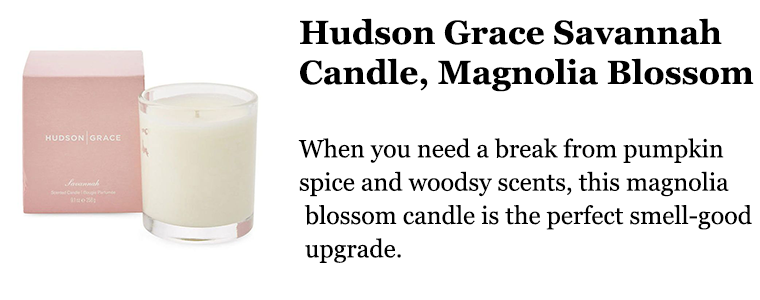
<style>
.page{position:relative;width:760px;height:300px;background:#ffffff}
.page>*{position:absolute;margin:0}
.t1{font:25px/33.3px "Georgia";color:#000000}
.t2{font:33.3px "Georgia-Bold";color:#000000}
</style>
<div class="page">
<p class="t1" style="left:298px;top:18px;width:456px;height:245px"><span class="t2">Hudson Grace Savannah <br>Candle, Magnolia Blossom<br><br></span>When you need a break from pumpkin <br>spice and woodsy scents, this magnolia<br> blossom candle is the perfect smell-good<br> upgrade.</p>
</div>
